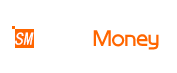
<style>
.page{position:relative;width:177px;height:73px;background:#ffffff}
.page>*{position:absolute;margin:0}
.t1{font:24px "BDZYJT--GB1-0";color:#ff6600}
.t2{font:24px "BDZYJT--GB1-0";color:#ffffff}
.t3{font:18px "SimHei";color:#ffffff;font-style:italic}
</style>
<div class="page">
<p class="t1" style="left:40px;top:30px;width:119px;height:20px"><span class="t2">Save</span>Money</p>
<p class="t3" style="left:15px;top:32px;width:19px;height:13px">SM</p>
</div>
